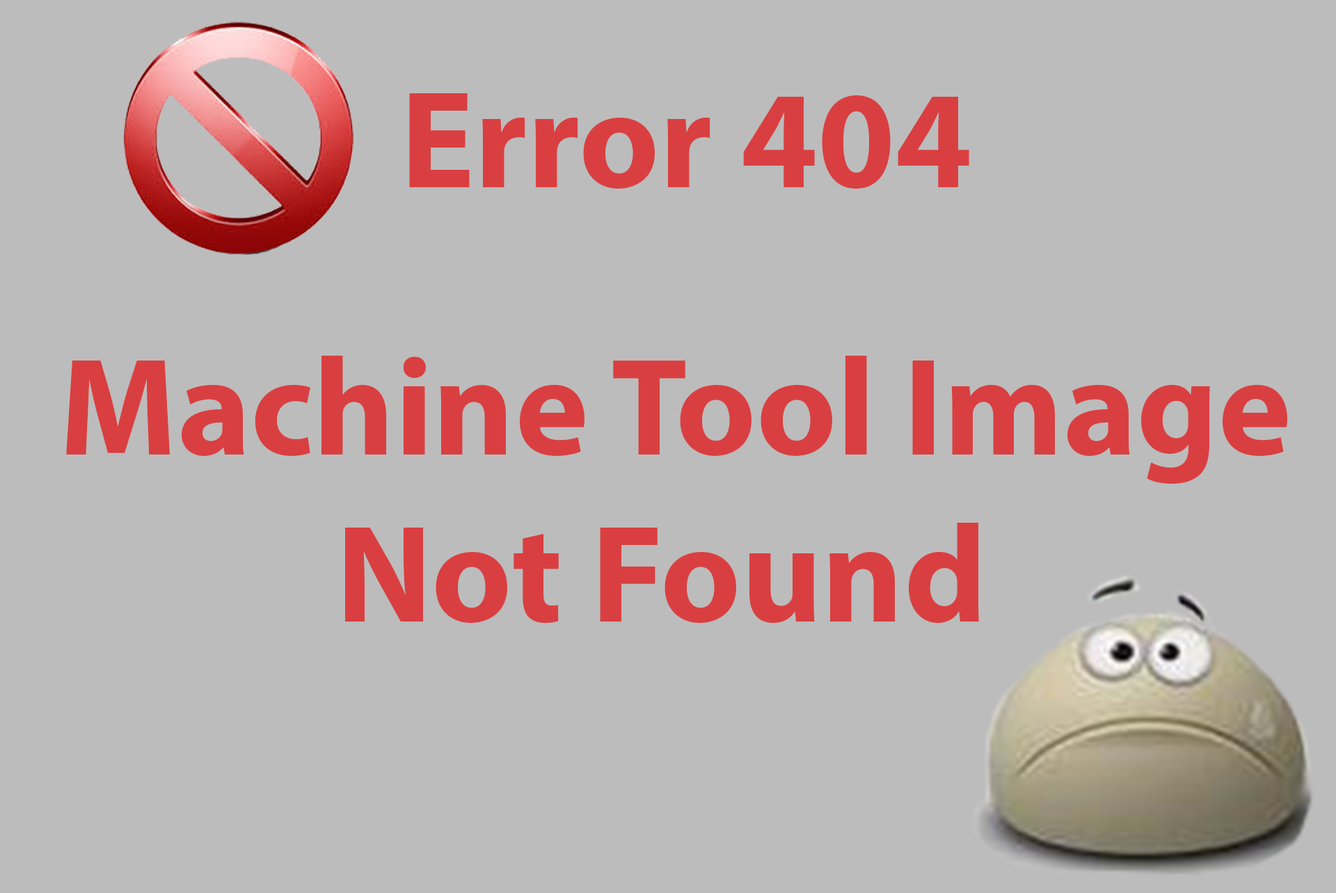
<style>
.page{position:relative;width:1336px;height:893px;background:#bcbcbc}
.page>*{position:absolute;margin:0}
.t1{font:139.2px "MyriadHebrew-Bold";color:#d93f41}
</style>
<div class="page">
<p class="t1" style="left:409px;top:93px;width:560px;height:96px">Error 404</p>
<p class="t1" style="left:66px;top:356px;width:1221px;height:267px;text-align:center">Machine Tool Image <br>Not Found</p>
</div>
